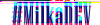
<style>
.page{position:relative;width:100px;height:25px;background:#ffffff}
.page>*{position:absolute;margin:0}
.t1{font:30px "NiagaraEngraved-Reg";font-weight:bold}
</style>
<div class="page">
<p class="t1" style="left:11px;top:1px;width:81px;height:23px">#MilkaDEV</p>
</div>
